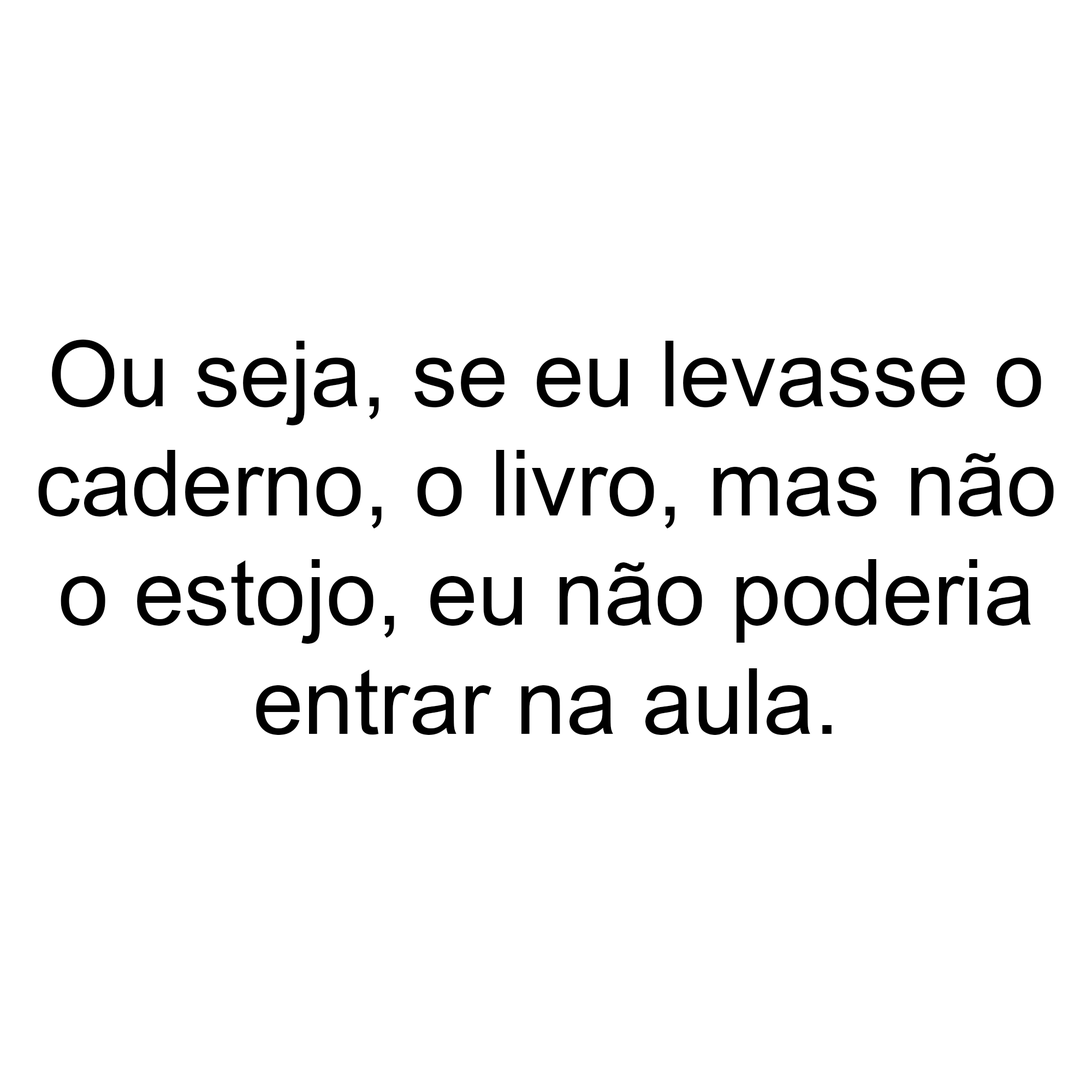
<style>
.page{position:relative;width:1092px;height:1092px;background:#ffffff}
.page>*{position:absolute;margin:0}
.t1{font:91px "ArialMT";color:#000000}
</style>
<div class="page">
<p class="t1" style="left:38px;top:340px;width:1016px;height:395px;text-align:center">Ou seja, se eu levasse o<br>caderno, o livro, mas não<br>o estojo, eu não poderia<br>entrar na aula.</p>
</div>
